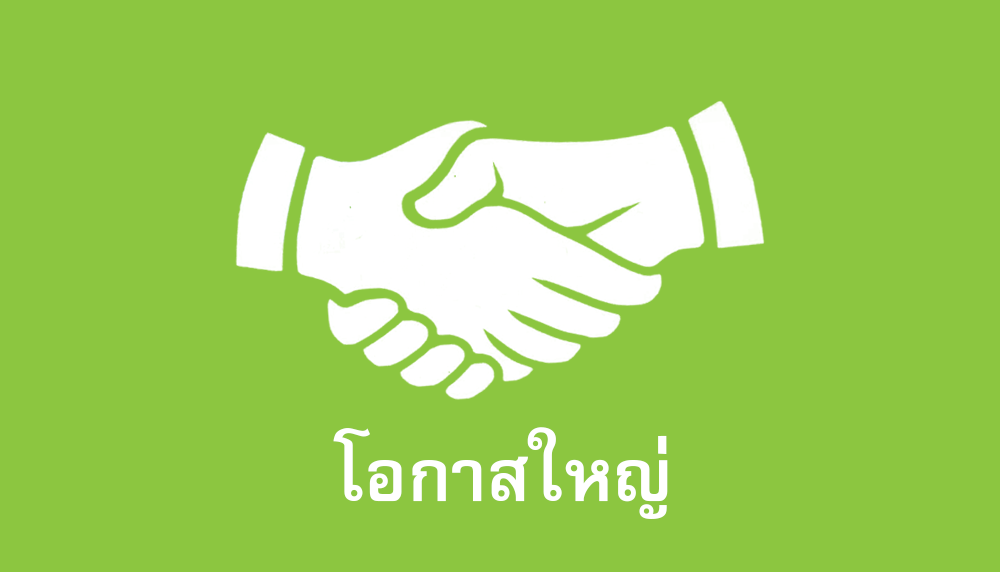
<style>
.page{position:relative;width:1000px;height:572px;background:#8cc640}
.page>*{position:absolute;margin:0}
.t1{font:102px "FreesiaUPCBold";color:#ffffff}
</style>
<div class="page">
<p class="t1" style="left:333px;top:427px;width:335px;height:92px">โอกาสใหญ่</p>
</div>
